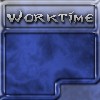
<style>
.page{position:relative;width:100px;height:100px}
.page>*{position:absolute;margin:0}
.t1{font:25px "NeverwinterNormal"}
</style>
<div class="page">
<p class="t1" style="left:7px;top:10px;width:86px;height:13px">worktime</p>
</div>
